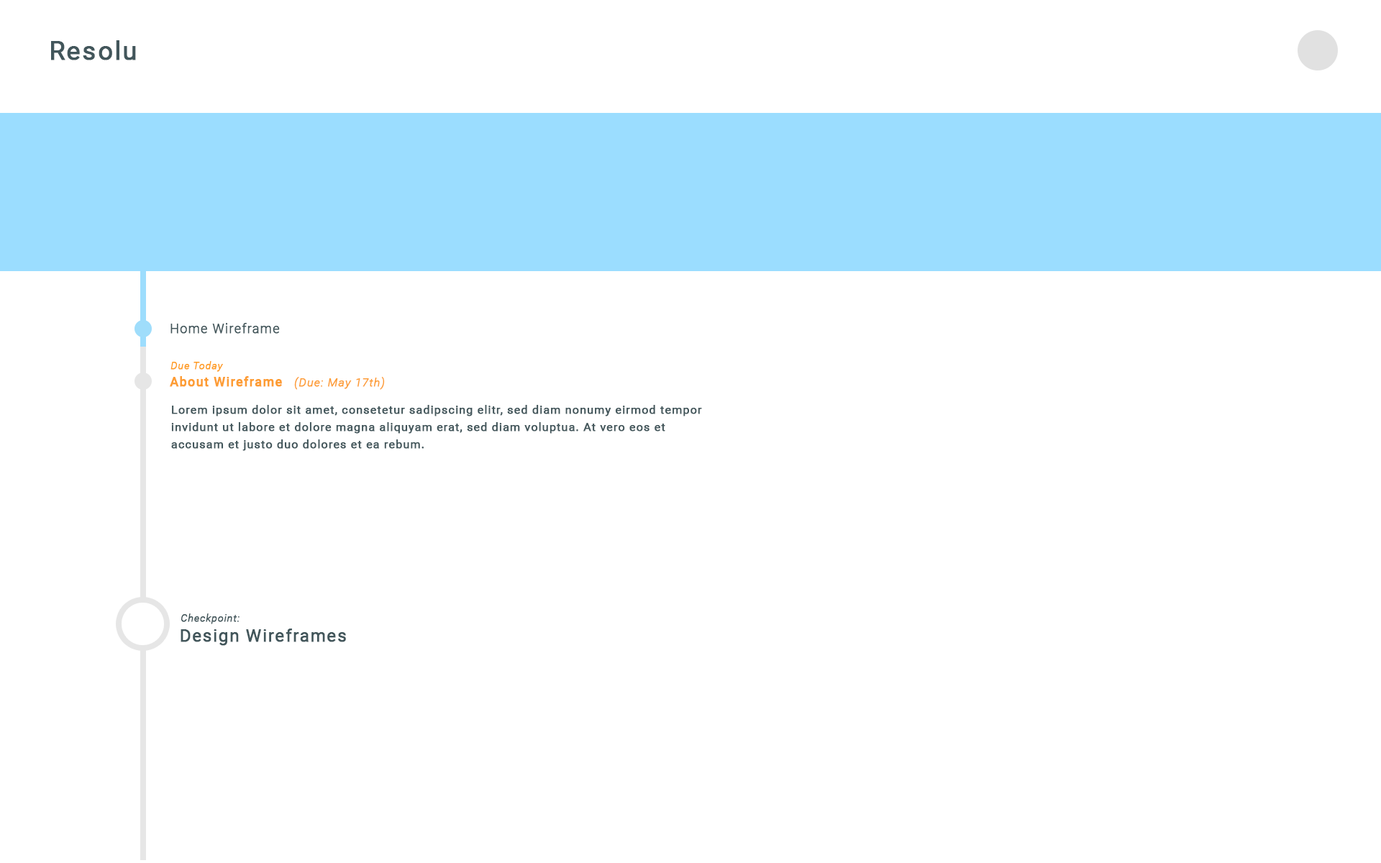
<style>
.page{position:relative;width:1381px;height:863px;background:#ffffff}
.page>*{position:absolute;margin:0}
.t1{font:25.9px "Roboto-Regular";letter-spacing:0.05em;color:#42565b;font-weight:bold}
.t2{font:12.9px "Roboto-Light";letter-spacing:0.05em;color:#42565b;font-weight:bold}
.t3{font:10.1px "Roboto-LightItalic";letter-spacing:0.05em;color:#ff9d1f;font-weight:bold}
.t4{font:12.9px "Roboto-Medium";letter-spacing:0.05em;color:#fd9d34;font-weight:bold}
.t5{font:11.5px "Roboto-LightItalic";letter-spacing:0.05em;color:#fd9d34;font-weight:bold}
.t6{font:11.5px/17.3px "Roboto-Regular";letter-spacing:0.05em;color:#42565b;font-weight:bold}
.t7{font:10.1px "Roboto-LightItalic";letter-spacing:0.05em;color:#42565b;font-weight:bold}
.t8{font:17.3px "Roboto-Regular";letter-spacing:0.05em;color:#42565b;font-weight:bold}
</style>
<div class="page">
<p class="t1" style="left:51px;top:40px;width:85px;height:20px">Resolu</p>
<p class="t2" style="left:170px;top:323px;width:110px;height:11px">Home Wireframe</p>
<p class="t3" style="left:170px;top:361px;width:53px;height:11px">Due Today</p>
<p class="t4" style="left:170px;top:376px;width:215px;height:14px">About Wireframe   <span class="t5">(Due: May 17th)</span></p>
<p class="t6" style="left:171px;top:405px;width:531px;height:46px">Lorem ipsum dolor sit amet, consetetur sadipscing elitr, sed diam nonumy eirmod tempor invidunt ut labore et dolore magna aliquyam erat, sed diam voluptua. At vero eos et accusam et justo duo dolores et ea rebum.</p>
<p class="t7" style="left:181px;top:614px;width:59px;height:10px">Checkpoint:</p>
<p class="t8" style="left:181px;top:629px;width:165px;height:17px">Design Wireframes</p>
</div>
